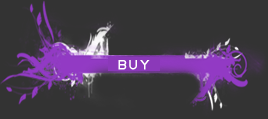
<style>
.page{position:relative;width:268px;height:119px;background:#333333}
.page>*{position:absolute;margin:0}
.t1{font:18px "Telegrafico";color:#ffffff}
</style>
<div class="page">
<p class="t1" style="left:118px;top:60px;width:32px;height:10px">Buy</p>
</div>
